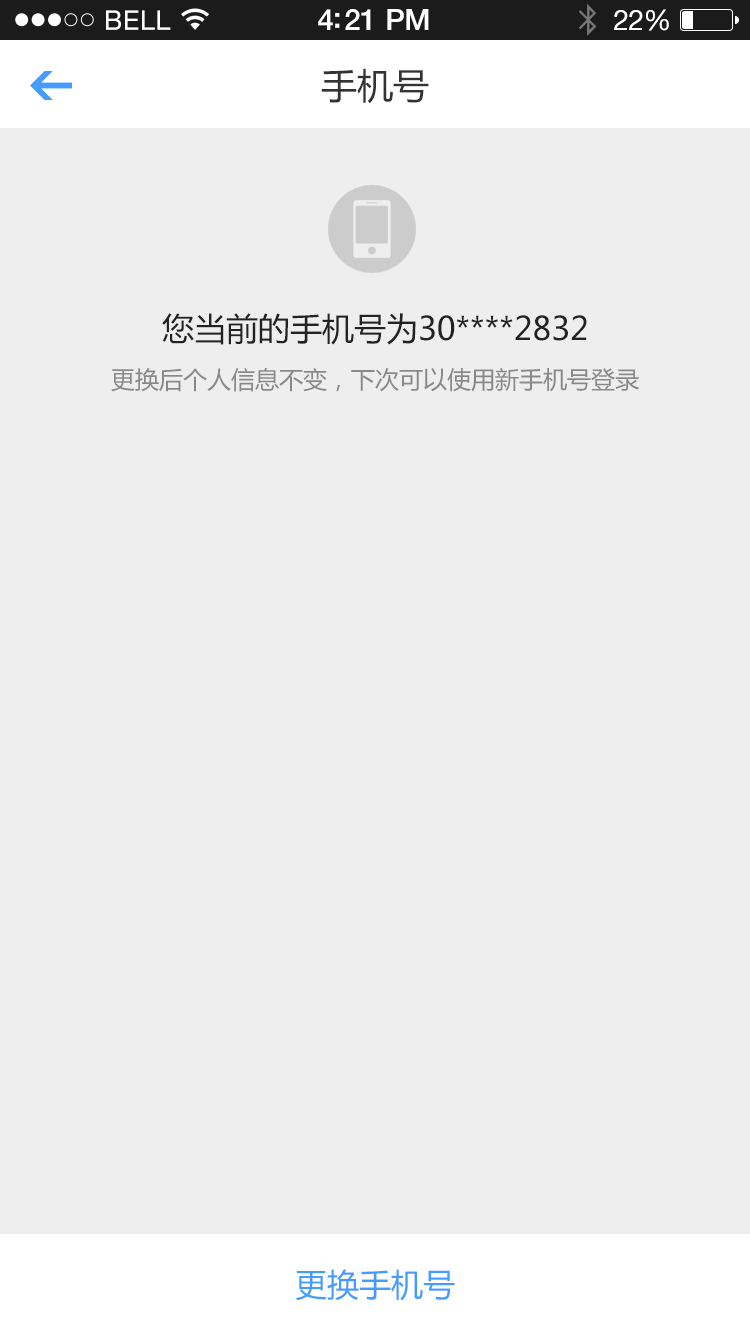
<style>
.page{position:relative;width:750px;height:1334px;background:#eeeeee}
.page>*{position:absolute;margin:0}
.t1{font:36px "MicrosoftYaHei";color:#333333}
.t2{font:32px "MicrosoftYaHei";color:#222222}
.t3{font:24px "MicrosoftYaHei";color:#888888}
.t4{font:32px "MicrosoftYaHei";color:#449cff}
</style>
<div class="page">
<p class="t1" style="left:321px;top:68px;width:108px;height:36px">手机号</p>
<p class="t2" style="left:162px;top:313px;width:425px;height:32px">您当前的手机号为30****2832</p>
<p class="t3" style="left:111px;top:367px;width:528px;height:25px">更换后个人信息不变，下次可以使用新手机号登录</p>
<p class="t4" style="left:295px;top:1269px;width:160px;height:32px">更换手机号</p>
</div>
